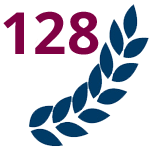
<style>
.page{position:relative;width:150px;height:150px;background:#ffffff}
.page>*{position:absolute;margin:0}
.t1{font:58.3px "OpenSans-Bold";color:#800144;text-transform:uppercase}
</style>
<div class="page">
<p class="t1" style="left:3px;top:11px;width:96px;height:44px">128</p>
</div>
